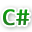
<style>
.page{position:relative;width:32px;height:32px;background:#ffffff}
.page>*{position:absolute;margin:0}
.t1{font:24px "Consolas";color:#188e18;font-weight:bold}
</style>
<div class="page">
<p class="t1" style="left:3px;top:9px;width:27px;height:17px">C#</p>
</div>
